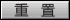
<style>
.page{position:relative;width:70px;height:20px}
.page>*{position:absolute;margin:0}
.t1{font:14px "MicrosoftYaHei";color:#282525}
</style>
<div class="page">
<p class="t1" style="left:14px;top:3px;width:41px;height:14px">重   置</p>
</div>
